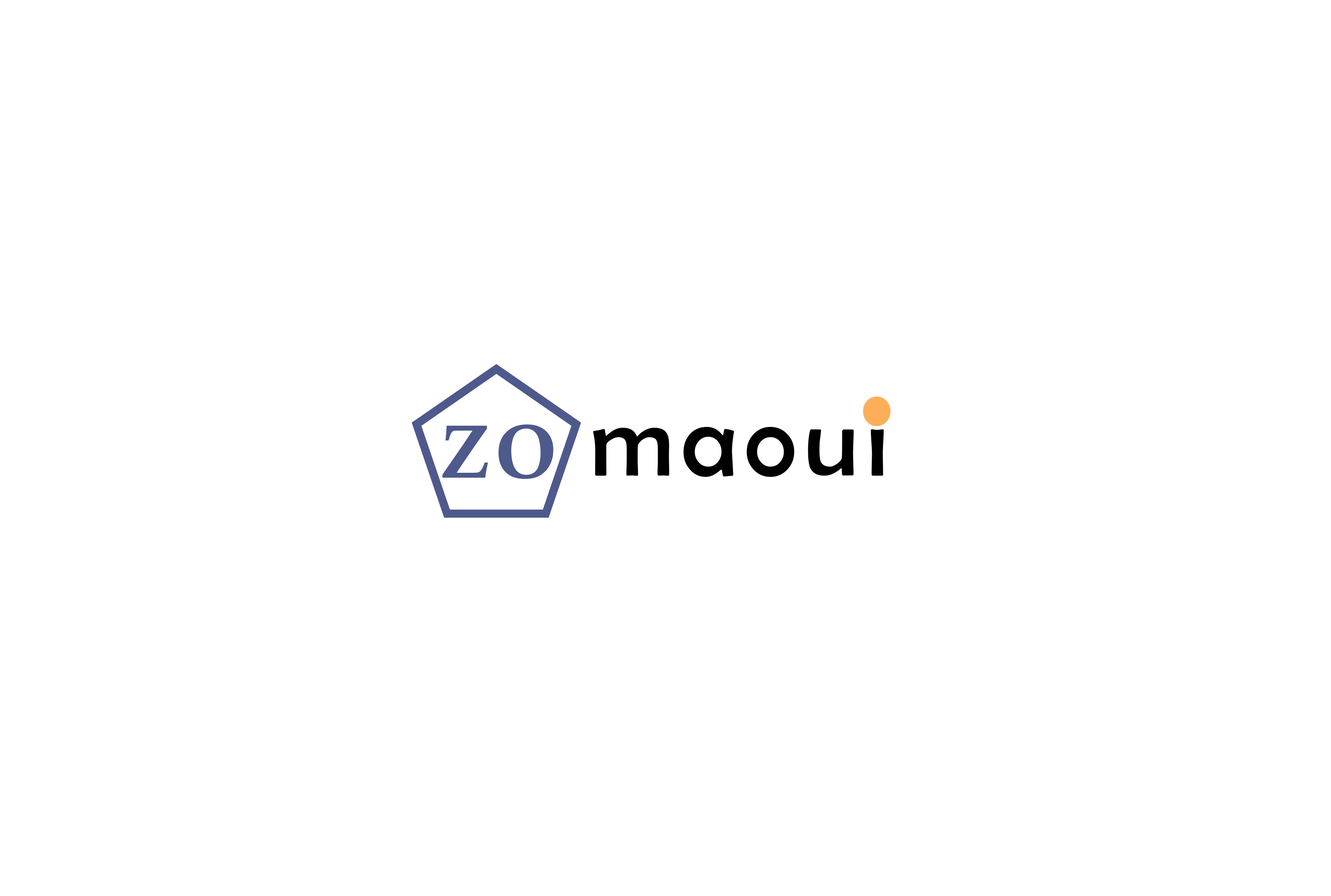
<style>
.page{position:relative;width:1331px;height:896px;background:#ffffff}
.page>*{position:absolute;margin:0}
.t1{font:184.5px "BerlinSansFB-Reg";letter-spacing:0.075em;color:#fcaf58}
.t2{font:100.3px "BerlinSansFB-Reg";letter-spacing:0.075em;color:#000000}
.t3{font:75.3px "CalisMTBol";letter-spacing:0.075em;color:#4e598c}
</style>
<div class="page">
<p class="t1" style="left:863px;top:396px;width:28px;height:30px">.</p>
<p class="t2" style="left:593px;top:411px;width:292px;height:66px">maoui</p>
<p class="t3" style="left:442px;top:424px;width:112px;height:55px">ZO</p>
</div>
